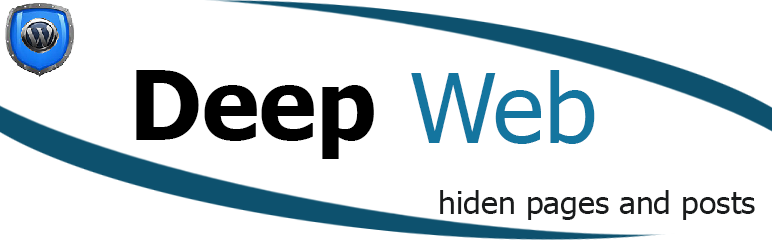
<style>
.page{position:relative;width:772px;height:240px;background:#ffffff}
.page>*{position:absolute;margin:0}
.t1{font:96px "Tahoma-Bold";color:#000000}
.t2{font:96px "Tahoma";color:#14759f}
.t3{font:32px "Tahoma";color:#191b1c}
</style>
<div class="page">
<p class="t1" style="left:136px;top:70px;width:238px;height:89px">Deep</p>
<p class="t2" style="left:411px;top:70px;width:184px;height:74px">Web</p>
<p class="t3" style="left:440px;top:190px;width:315px;height:30px">hiden pages and posts</p>
</div>
